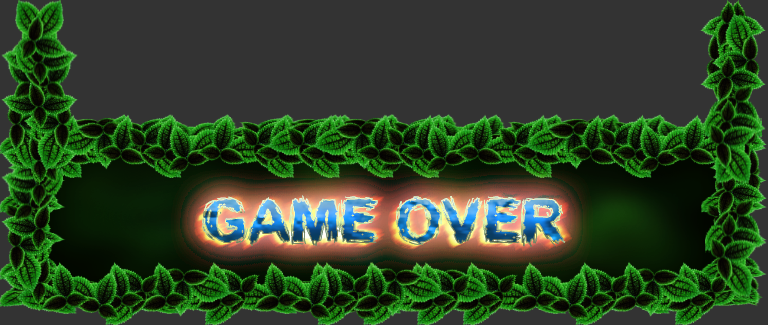
<style>
.page{position:relative;width:768px;height:325px;background:#333333}
.page>*{position:absolute;margin:0}
.t1{font:60px "SplinterWood";text-transform:uppercase}
</style>
<div class="page">
<p class="t1" style="left:202px;top:195px;width:364px;height:52px">GAME OVER</p>
<p class="t1" style="left:202px;top:195px;width:364px;height:52px">GAME OVER</p>
</div>
